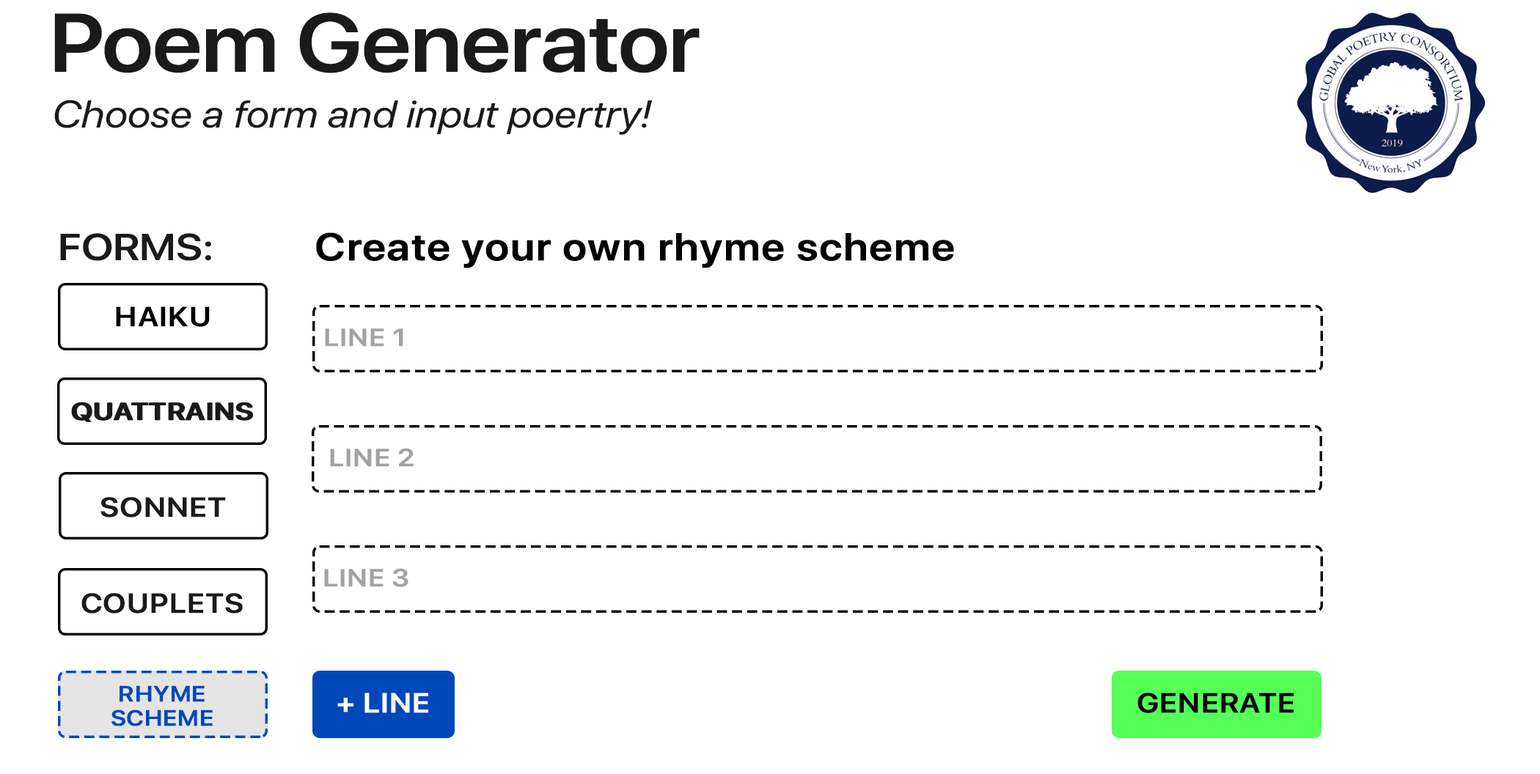
<style>
.page{position:relative;width:1540px;height:774px;background:#ffffff}
.page>*{position:absolute;margin:0}
.t1{font:82.5px "SFProDisplay-Semibold";letter-spacing:-0.005em;color:#1a1a1a;scale:1.11 1}
.t2{font:38.5px "SFProDisplay-RegularItalic";color:#1a1a1a;scale:1.11 1}
.t3{font:37.6px "SFProDisplay-Semibold";color:#1a1a1a;scale:1.14 1}
.t4{font:38.5px "SFProDisplay-Semibold";letter-spacing:0.025em;color:#000000;font-weight:bold;scale:1.11 1}
.t5{font:27.5px "SFProDisplay-Semibold";letter-spacing:0.025em;color:#000000;font-weight:bold;scale:1.11 1}
.t6{font:24.7px "SFProDisplay-Semibold";letter-spacing:0.025em;color:#a3a3a3;font-weight:bold;scale:1.14 1}
.t7{font:24.7px "SFProDisplay-Semibold";letter-spacing:0.025em;color:#1a1a1a;font-weight:bold;scale:1.14 1}
.t8{font:27.5px "SFProDisplay-Semibold";letter-spacing:0.025em;color:#1a1a1a;font-weight:bold;scale:1.11 1}
.t9{font:22px/24.4px "SFProDisplay-Semibold";letter-spacing:0.025em;color:#0048ba;font-weight:bold;scale:1.11 1}
.t10{font:27.5px "SFProDisplay-Semibold";letter-spacing:0.025em;color:#ffffff;font-weight:bold;scale:1.11 1}
</style>
<div class="page">
<p class="t1" style="left:54px;top:12px;width:646px;height:61px">Poem Generator</p>
<p class="t2" style="left:54px;top:100px;width:599px;height:35px">Choose a form and input poertry!</p>
<p class="t3" style="left:60px;top:233px;width:151px;height:28px">FORMS:</p>
<p class="t4" style="left:316px;top:232px;width:638px;height:36px">Create your own rhyme scheme</p>
<p class="t5" style="left:116px;top:307px;width:94px;height:20px">HAIKU</p>
<p class="t6" style="left:325px;top:329px;width:78px;height:18px">LINE 1</p>
<p class="t7" style="left:71px;top:402px;width:181px;height:20px">QUATTRAINS</p>
<p class="t7" style="left:73px;top:402px;width:180px;height:20px">QUATTRAINS</p>
<p class="t6" style="left:330px;top:448px;width:84px;height:19px">LINE 2</p>
<p class="t8" style="left:100px;top:497px;width:126px;height:21px">SONNET</p>
<p class="t6" style="left:324px;top:568px;width:84px;height:19px">LINE 3</p>
<p class="t8" style="left:81px;top:593px;width:162px;height:21px">COUPLETS</p>
<p class="t9" style="left:111px;top:686px;width:102px;height:41px;text-align:center">RHYME <br>SCHEME</p>
<p class="t10" style="left:337px;top:693px;width:91px;height:20px">+ LINE</p>
<p class="t5" style="left:1137px;top:693px;width:157px;height:20px">GENERATE</p>
</div>
